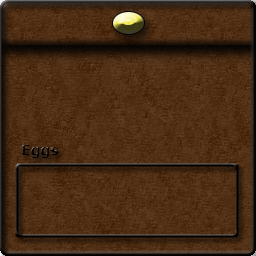
<style>
.page{position:relative;width:256px;height:256px}
.page>*{position:absolute;margin:0}
.t1{font:14px "Verdana-Bold";color:#000000}
</style>
<div class="page">
<p class="t1" style="left:22px;top:145px;width:36px;height:13px">Eggs</p>
</div>
